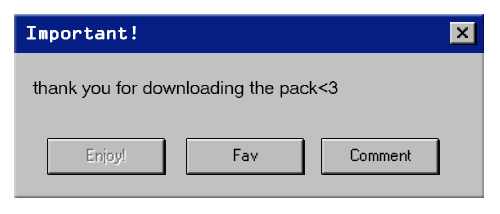
<style>
.page{position:relative;width:500px;height:214px;background:#c1c1c1}
.page>*{position:absolute;margin:0}
.t1{font:16px "OCRAStd";letter-spacing:-0.1em;color:#ffffff;font-weight:bold;scale:1.1 1}
.t2{font:18px "MS Sans Serif";color:#000000}
.t3{font:17px "W95FARegular";color:#737373}
.t4{font:17px "W95FARegular";color:#000000}
</style>
<div class="page">
<p class="t1" style="left:26px;top:26px;width:110px;height:17px">Important!</p>
<p class="t1" style="left:26px;top:26px;width:110px;height:17px">Important!</p>
<p class="t2" style="left:32px;top:81px;width:306px;height:17px">thank you for downloading the pack&lt;3</p>
<p class="t3" style="left:86px;top:148px;width:39px;height:16px">Enjoy!</p>
<p class="t4" style="left:233px;top:148px;width:25px;height:14px">Fav</p>
<p class="t4" style="left:350px;top:148px;width:61px;height:14px">Comment</p>
</div>
